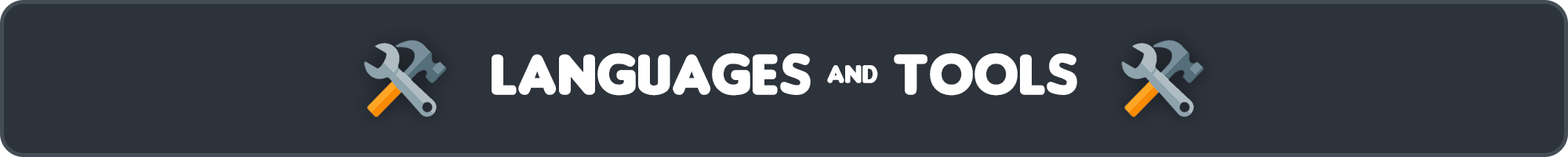
<style>
.page{position:relative;width:1568px;height:157px;background:#2d333b}
.page>*{position:absolute;margin:0}
.t1{font:61.2px "Insaniburger";color:#ffffff}
</style>
<div class="page">
<p class="t1" style="left:492px;top:53px;width:585px;height:43px">lANGUAGES &amp; tools</p>
</div>
